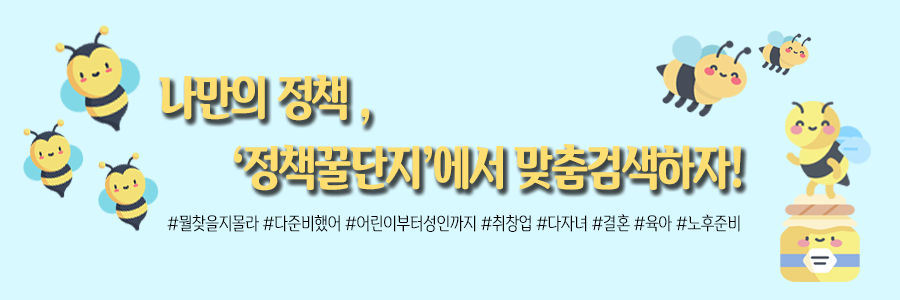
<style>
.page{position:relative;width:900px;height:300px;background:#d8f9ff}
.page>*{position:absolute;margin:0}
.t1{font:48px "BinggraeII-Bold";letter-spacing:-0.05em;color:#ffde71;scale:0.83 1}
.t2{font:18px "BinggraeII";letter-spacing:-0.05em;color:#000000;scale:0.83 1}
</style>
<div class="page">
<p class="t1" style="left:159px;top:74px;width:582px;height:117px">나만의 정책 , <br>  ‘정책꿀단지’에서 맞춤검색하자!</p>
<p class="t2" style="left:167px;top:214px;width:573px;height:18px">#뭘찾을지몰라 #다준비했어 #어린이부터성인까지 #취창업 #다자녀 #결혼 #육아 #노후준비</p>
</div>
